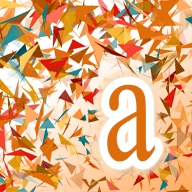
<style>
.page{position:relative;width:192px;height:192px}
.page>*{position:absolute;margin:0}
.t1{font:244px "MicrosoftHimalaya";letter-spacing:0.135em;color:#de6d09;scale:0.72 1}
</style>
<div class="page">
<p class="t1" style="left:107px;top:84px;width:48px;height:78px">a</p>
</div>
